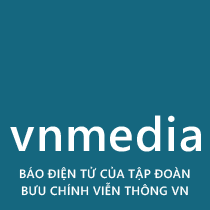
<style>
.page{position:relative;width:210px;height:210px;background:#15677f}
.page>*{position:absolute;margin:0}
.t1{font:48px "SegoeWP-Semibold";letter-spacing:0.025em;color:#ffffff}
.t2{font:12px "SegoeWP-Semibold";letter-spacing:0.025em;color:#fefefe}
.t3{font:12px "SegoeWP-Semibold";letter-spacing:0.025em;color:#ffffff}
</style>
<div class="page">
<p class="t1" style="left:10px;top:115px;width:191px;height:37px">vnmedia</p>
<p class="t2" style="left:19px;top:166px;width:171px;height:14px">BÁO ĐIỆN TỬ CỦA TẬP ĐOÀN</p>
<p class="t3" style="left:21px;top:182px;width:167px;height:14px">BƯU CHÍNH VIỄN THÔNG VN</p>
</div>
